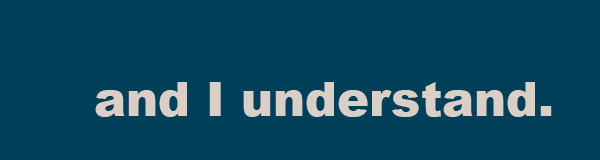
<style>
.page{position:relative;width:600px;height:160px;background:#024059}
.page>*{position:absolute;margin:0}
.t1{font:48px "Arial-Black";color:#d9cfc7}
</style>
<div class="page">
<p class="t1" style="left:95px;top:82px;width:457px;height:35px">and I understand.</p>
</div>
